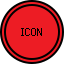
<style>
.page{position:relative;width:64px;height:64px;background:#ed1c24}
.page>*{position:absolute;margin:0}
.t1{font:16px "Pokemon-Mystery-Dungeon";color:#000000}
</style>
<div class="page">
<p class="t1" style="left:21px;top:28px;width:21px;height:8px">ICON</p>
</div>
